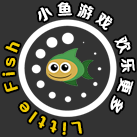
<style>
.page{position:relative;width:137px;height:137px;background:#333333}
.page>*{position:absolute;margin:0}
.t1{font:15.1px/33.3px "FZRUIZYS_DA--GB1-0";letter-spacing:0.28em;color:#ffffff}
.t2{font:15.1px/33.3px "FZRUIZYS_DA--GB1-0";letter-spacing:0.28em;color:#efcb02}
</style>
<div class="page">
<p class="t1" style="left:2px;top:2px;width:133px;height:133px">小鱼游戏 欢乐更多   <span class="t2">Little Fish</span> Game Fun More</p>
</div>
